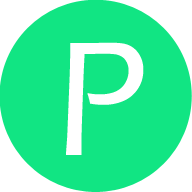
<style>
.page{position:relative;width:192px;height:192px;background:#11e583}
.page>*{position:absolute;margin:0}
.t1{font:168.1px "ErasITC-Medium";color:#ffffff}
</style>
<div class="page">
<p class="t1" style="left:66px;top:42px;width:78px;height:113px">P</p>
</div>
